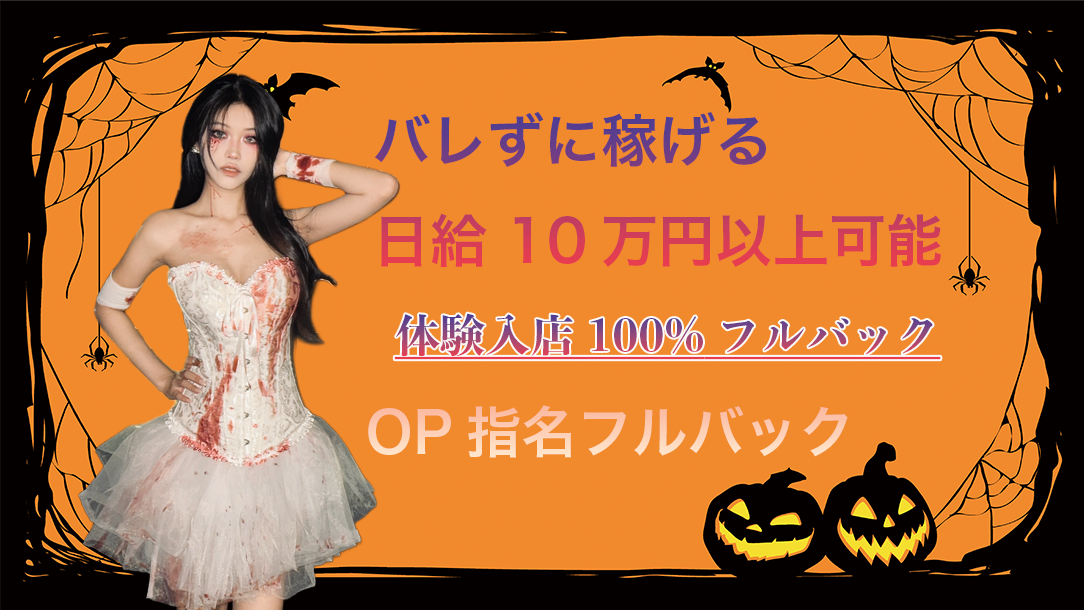
<style>
.page{position:relative;width:1084px;height:610px;background:#f1892d}
.page>*{position:absolute;margin:0}
.t1{font:56.9px/100px "HiraKakuPro-W6"}
.t2{font:44.9px "YuMin-Extrabold";text-decoration:underline}
.t3{font:55.5px "HiraKakuPro-W6";color:#fed0b6}
</style>
<div class="page">
<p class="t1" style="left:374px;top:112px;width:567px;height:155px">バレずに稼げる<br>日給 10万円以上可能</p>
<p class="t2" style="left:394px;top:313px;width:547px;height:47px">体験入店100%フルバック</p>
<p class="t3" style="left:368px;top:405px;width:480px;height:53px">OP指名フルバック</p>
</div>
